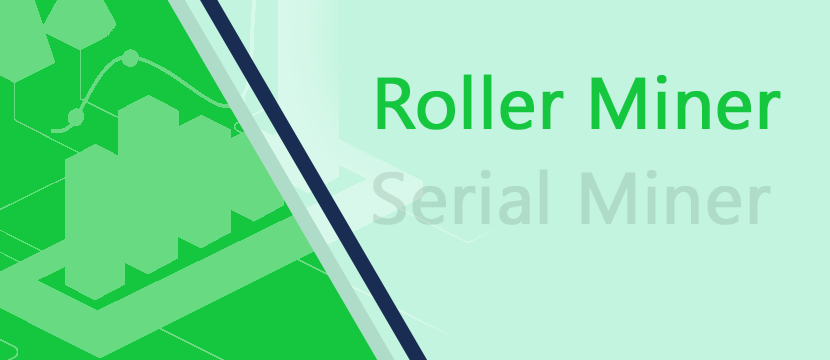
<style>
.page{position:relative;width:830px;height:360px;background:#c2f4df}
.page>*{position:absolute;margin:0}
.t1{font:72.2px "SegoeUI";color:#15c63f;font-weight:bold}
.t2{font:72.2px "SegoeUI";color:#afdcc8;font-weight:bold}
</style>
<div class="page">
<p class="t1" style="left:377px;top:74px;width:404px;height:56px">Roller Miner</p>
<p class="t2" style="left:373px;top:169px;width:398px;height:56px">Serial Miner</p>
</div>
